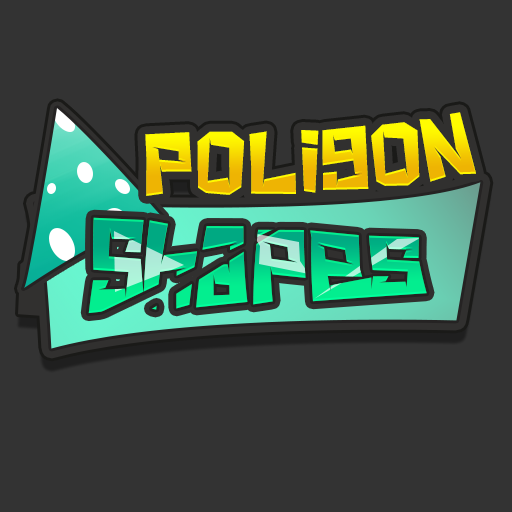
<style>
.page{position:relative;width:512px;height:512px;background:#333333}
.page>*{position:absolute;margin:0}
.t1{font:87.5px "KitchenKnifeRegular";letter-spacing:0.025em}
.t2{font:77.8px "KitchenKnifeRegular";letter-spacing:0.01em;scale:1.25 1}
</style>
<div class="page">
<p class="t1" style="left:145px;top:112px;width:331px;height:84px">PoligoN</p>
<p class="t2" style="left:88px;top:217px;width:339px;height:97px">Shapes</p>
</div>
